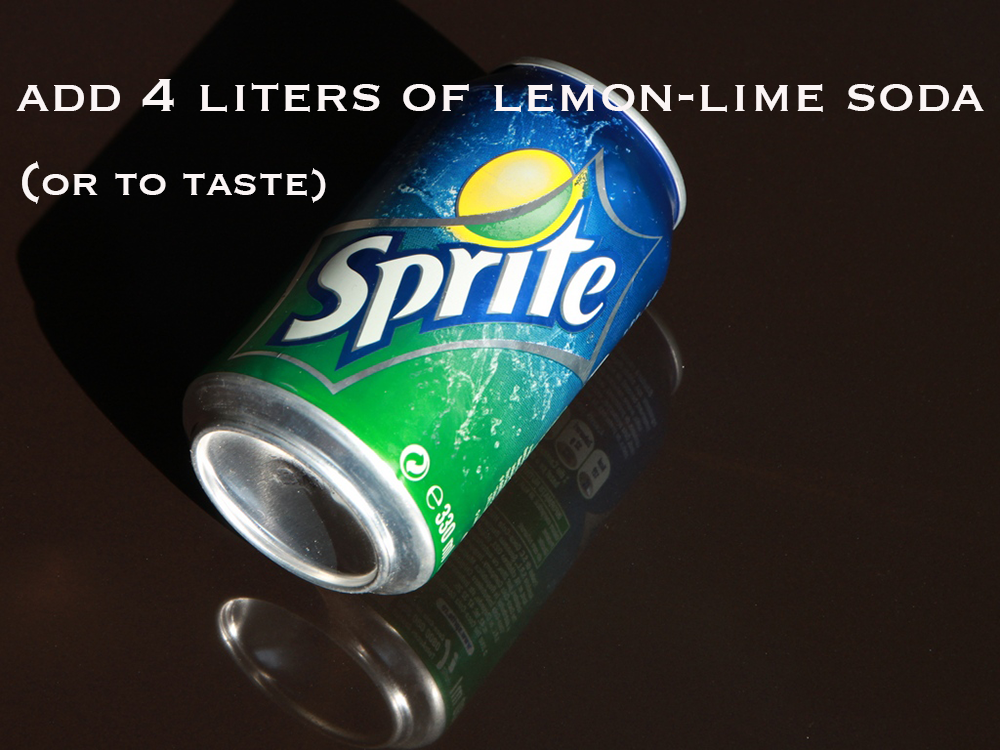
<style>
.page{position:relative;width:1000px;height:750px}
.page>*{position:absolute;margin:0}
.t1{font:60px "Copperplate";color:#fbf5f5}
.t2{font:48px "Copperplate";color:#fbf5f5}
</style>
<div class="page">
<p class="t1" style="left:16px;top:79px;width:968px;height:33px">add 4 liters of lemon-lime soda</p>
<p class="t2" style="left:22px;top:161px;width:304px;height:43px"><span class="t1">(</span>or to taste)</p>
</div>
